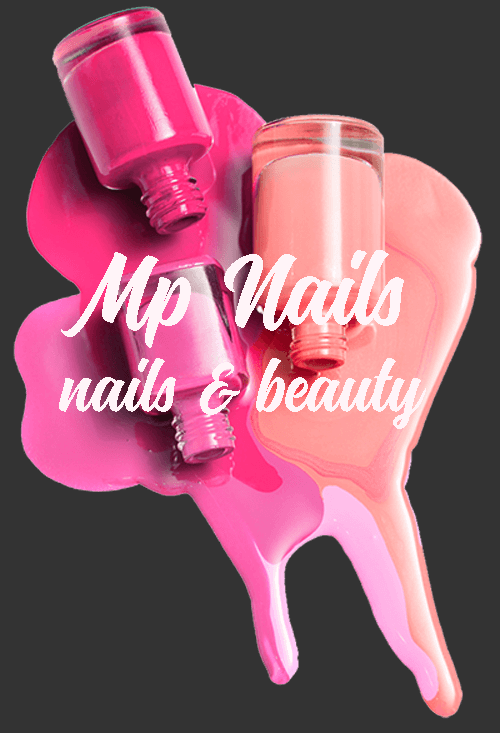
<style>
.page{position:relative;width:500px;height:733px;background:#333333}
.page>*{position:absolute;margin:0}
.t1{font:72px "Montana";color:#fff4f8}
.t2{font:100px "Montana";color:#fff4f8}
</style>
<div class="page">
<p class="t1" style="left:59px;top:250px;width:367px;height:179px;text-align:center"><span class="t2">Mp Nails<br></span>nails &amp; beauty</p>
</div>
